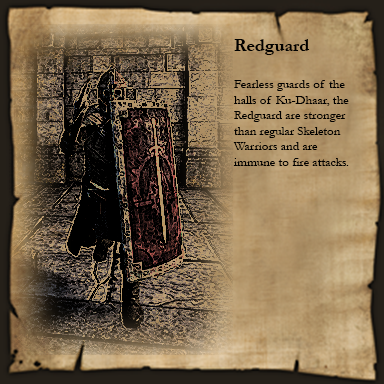
<style>
.page{position:relative;width:384px;height:384px}
.page>*{position:absolute;margin:0}
.t1{font:13px "Garamond";color:#000000}
.t2{font:18px "Garamond-Bold";color:#000000}
</style>
<div class="page">
<p class="t1" style="left:233px;top:39px;width:116px;height:127px"><span class="t2">Redguard<br><br></span>Fearless guards of the halls of Ku-Dhaar, the Redguard are stronger than regular Skeleton Warriors and are immune to fire attacks.</p>
</div>
